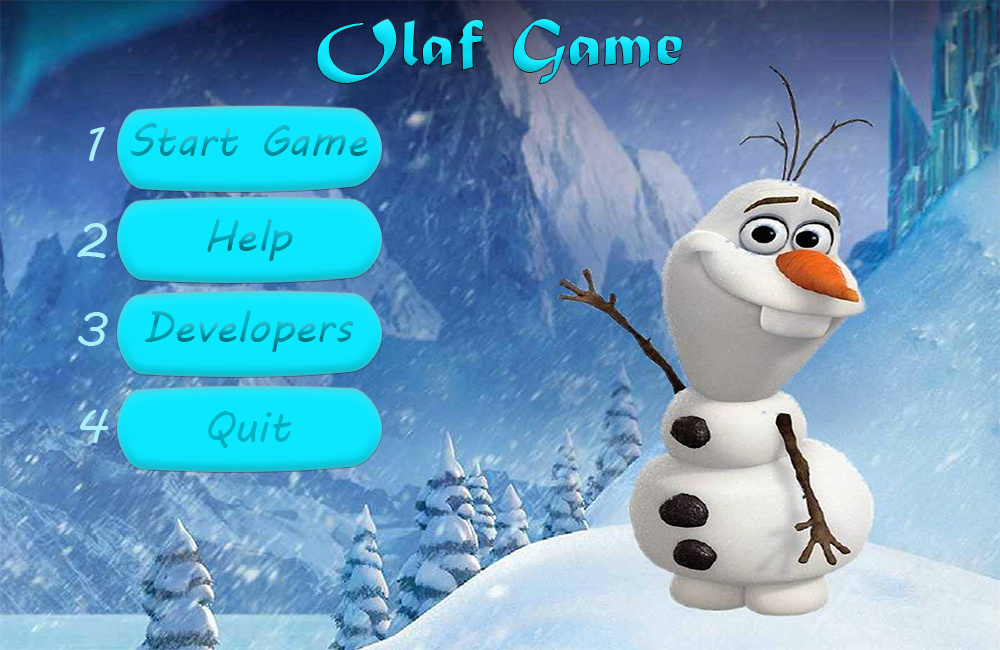
<style>
.page{position:relative;width:1000px;height:650px}
.page>*{position:absolute;margin:0}
.t1{font:72px "MaturaMTScriptCapitals"}
.t2{font:43px "MVBoli"}
.t3{font:48px "MVBoli";color:#a8eff7}
.t4{font:43px "MVBoli";color:#05afc2}
</style>
<div class="page">
<p class="t1" style="left:316px;top:18px;width:367px;height:66px">Olaf Game</p>
<p class="t2" style="left:130px;top:123px;width:238px;height:33px">Start Game</p>
<p class="t3" style="left:89px;top:127px;width:16px;height:34px">1</p>
<p class="t2" style="left:207px;top:219px;width:86px;height:42px">Help</p>
<p class="t3" style="left:77px;top:223px;width:30px;height:35px">2</p>
<p class="t3" style="left:78px;top:312px;width:30px;height:34px">3</p>
<p class="t2" style="left:145px;top:310px;width:209px;height:42px">Developers</p>
<p class="t3" style="left:80px;top:409px;width:29px;height:34px">4</p>
<p class="t4" style="left:208px;top:411px;width:84px;height:37px">Quit</p>
</div>
